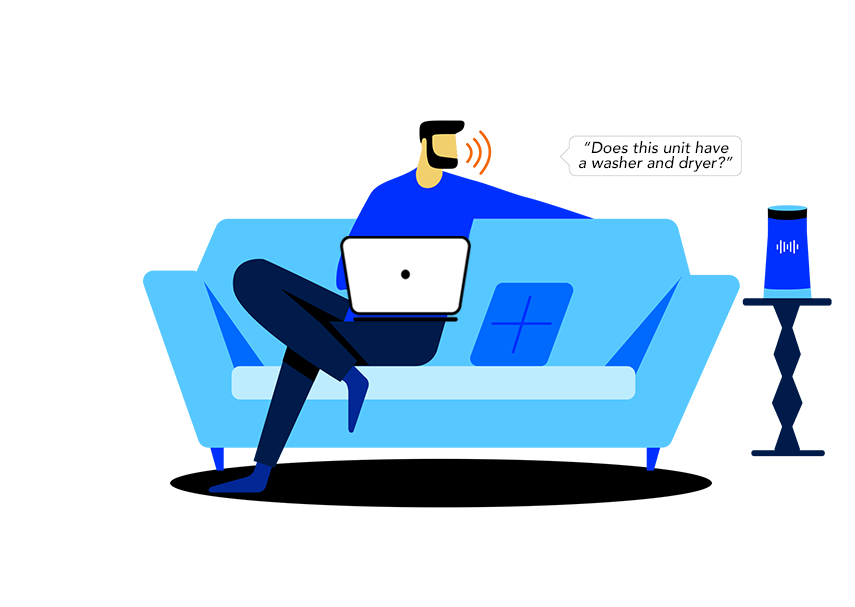
<style>
.page{position:relative;width:855px;height:607px;background:#ffffff}
.page>*{position:absolute;margin:0}
.t1{font:16px/14.6px "Avenir-MediumOblique";color:#000000}
</style>
<div class="page">
<p class="t1" style="left:579px;top:141px;width:154px;height:31px;text-align:center">“Does this unit have<br>a washer and dryer?”</p>
</div>
